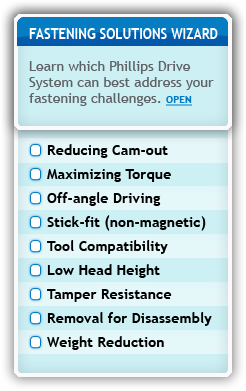
<style>
.page{position:relative;width:246px;height:391px;background:#cdf0f5}
.page>*{position:absolute;margin:0}
.t1{font:14px/24px "TrebuchetMS-Bold";letter-spacing:0.01em;color:#000000}
.t2{font:14px/18px "TrebuchetMS-Bold";letter-spacing:0.01em;color:#ffffff;scale:0.91 1}
.t3{font:16px/10px "TrebuchetMS-Bold";color:#000000}
.t4{font:16px/16px "TrebuchetMS-Bold";color:#000000}
.t5{font:14px "TrebuchetMS-Bold";letter-spacing:0.01em;color:#ffffff;scale:0.91 1}
.t6{font:14px/16px "TrebuchetMS";color:#606365}
.t7{font:10px/14px "TrebuchetMS-Bold";letter-spacing:0.01em;color:#0079c2;text-decoration:underline}
</style>
<div class="page">
<p class="t1" style="left:29px;top:28px;width:189px;height:322px"><span class="t2">FASTENING SOLUTIONS WIZARD<br></span>Select your industry:<br><span class="t3">My most critical </span><span class="t4">needs <br>or challenges are:<br></span>Reducing Cam-out<br>Maximizing Torque<br>Off-angle Driving<br>Stick-fit (non-magnetic)<br>Tool Compatibility<br>Low Head Height<br>Tamper Resistance<br>Removal for Disassembly<br>Weight Reduction</p>
<p class="t5" style="left:29px;top:28px;width:189px;height:11px">FASTENING SOLUTIONS WIZARD</p>
<p class="t6" style="left:29px;top:61px;width:185px;height:45px">Learn which Phillips Drive <br>System can best address your <br>fastening challenges. <span class="t7">OPEN</span></p>
</div>
